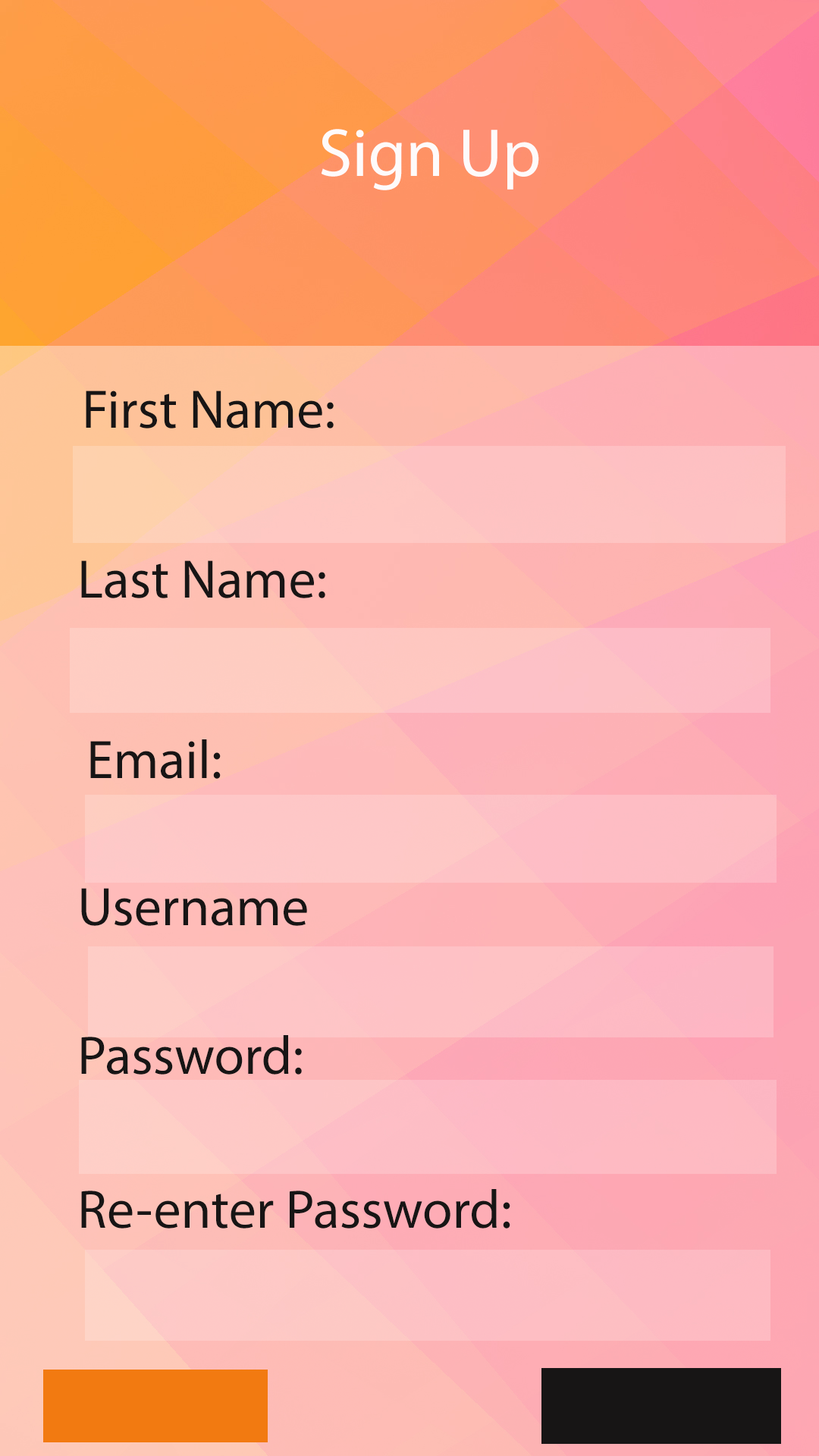
<style>
.page{position:relative;width:819px;height:1456px}
.page>*{position:absolute;margin:0}
.t1{font:68.2px "MyriadPro-Regular";color:#fefafa}
.t2{font:54.6px "MyriadPro-Regular";color:#171515}
</style>
<div class="page">
<p class="t1" style="left:321px;top:129px;width:218px;height:61px">Sign Up</p>
<p class="t2" style="left:86px;top:391px;width:248px;height:37px">First Name:</p>
<p class="t2" style="left:81px;top:560px;width:244px;height:38px">Last Name:</p>
<p class="t2" style="left:90px;top:739px;width:131px;height:40px">Email:</p>
<p class="t2" style="left:81px;top:888px;width:226px;height:38px">Username</p>
<p class="t2" style="left:81px;top:1035px;width:221px;height:40px">Password:</p>
<p class="t2" style="left:81px;top:1189px;width:429px;height:39px">Re-enter Password:</p>
</div>
